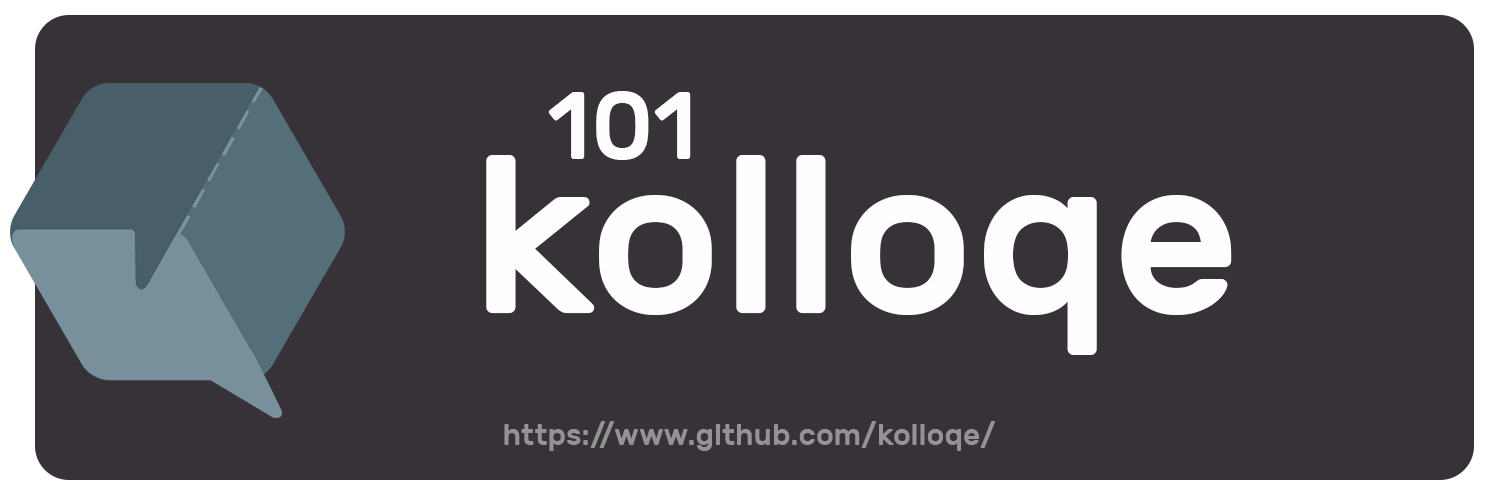
<style>
.page{position:relative;width:1500px;height:500px;background:#373238}
.page>*{position:absolute;margin:0}
.t1{font:96px "Rubik-Medium";color:#fefefe}
.t2{font:223.3px "Rubik-Medium";color:#fefefe}
.t3{font:30px "Rubik-Medium";color:#949295}
</style>
<div class="page">
<p class="t1" style="left:548px;top:91px;width:143px;height:69px">101</p>
<p class="t2" style="left:486px;top:155px;width:746px;height:200px">kolloqe</p>
<p class="t3" style="left:504px;top:421px;width:492px;height:30px">https://www.github.com/kolloqe/</p>
</div>
